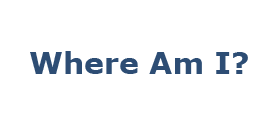
<style>
.page{position:relative;width:278px;height:131px;background:#ffffff}
.page>*{position:absolute;margin:0}
.t1{font:30px "Verdana-Bold";color:#2d4d74}
</style>
<div class="page">
<p class="t1" style="left:30px;top:51px;width:218px;height:23px">Where Am I?</p>
</div>
